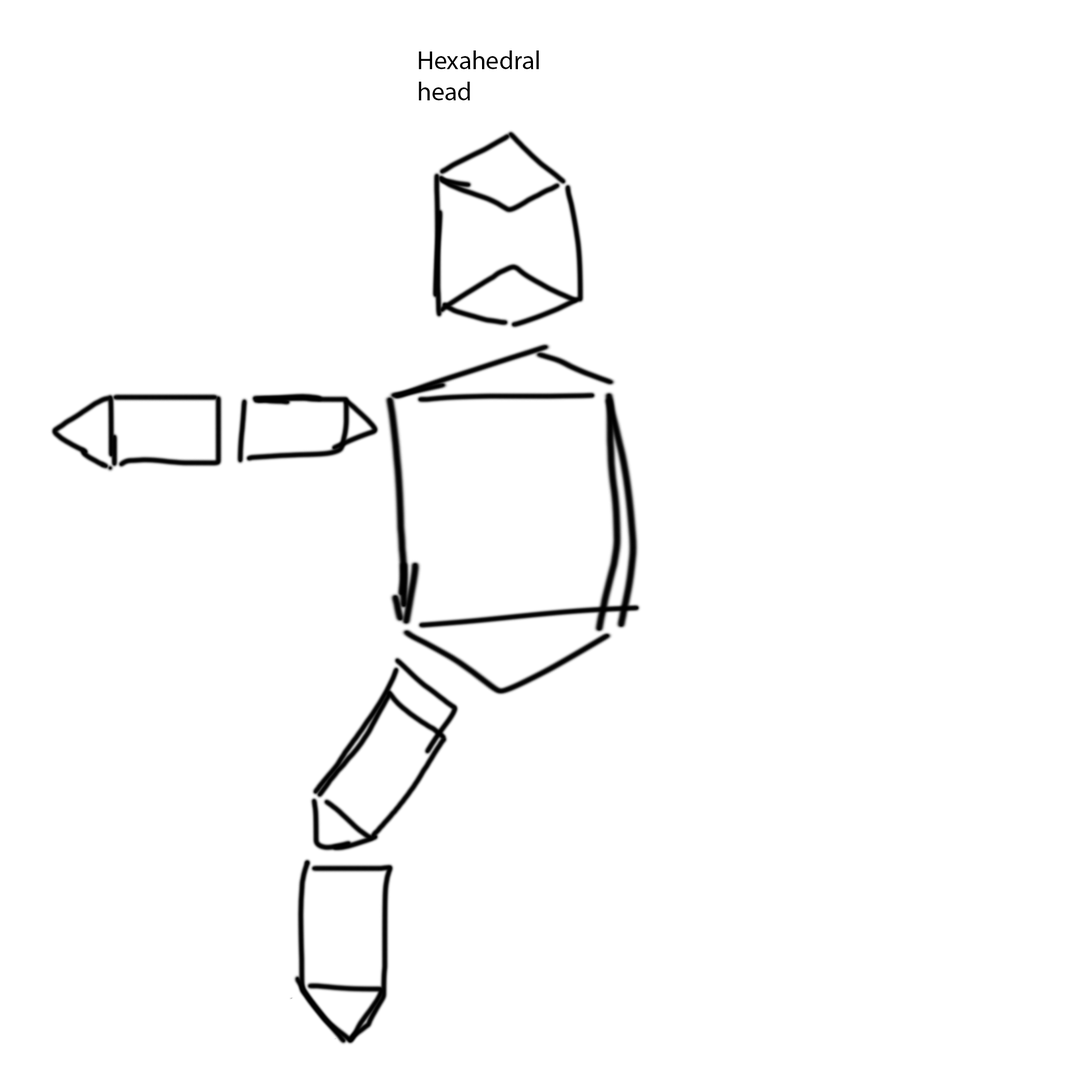
<style>
.page{position:relative;width:1092px;height:1092px;background:#ffffff}
.page>*{position:absolute;margin:0}
.t1{font:26px "MyriadPro-Regular";color:#000000}
</style>
<div class="page">
<p class="t1" style="left:419px;top:50px;width:120px;height:50px">Hexahedral head</p>
</div>
